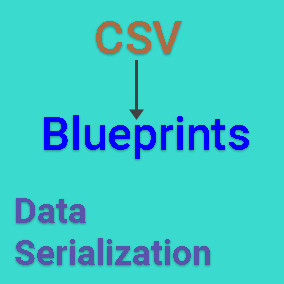
<style>
.page{position:relative;width:284px;height:284px;background:#3adbce}
.page>*{position:absolute;margin:0}
.t1{font:46px "Roboto-Medium";color:#ac6b43}
.t2{font:46px "Roboto-Medium";color:#0000ff}
.t3{font:35px "Roboto-Bold";color:#5953aa}
</style>
<div class="page">
<p class="t1" style="left:96px;top:21px;width:86px;height:33px">CSV</p>
<p class="t2" style="left:44px;top:115px;width:205px;height:44px">Blueprints</p>
<p class="t3" style="left:15px;top:198px;width:195px;height:67px">Data<br>Serialization</p>
</div>
